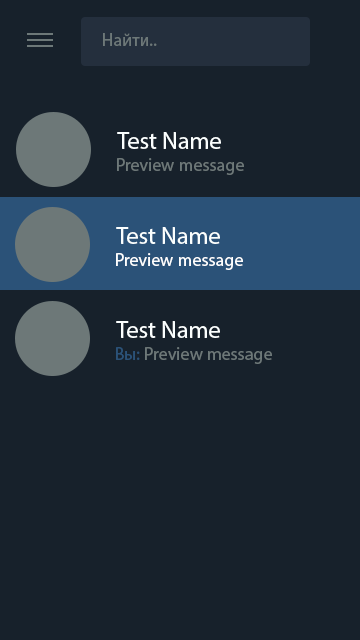
<style>
.page{position:relative;width:360px;height:640px;background:#17212b}
.page>*{position:absolute;margin:0}
.t1{font:18px "MyriadPro-Regular";color:#6d7878}
.t2{font:24px "MyriadPro-Regular";color:#fbffff}
.t3{font:18px "MyriadPro-Regular";color:#fefefe}
.t4{font:18px "MyriadPro-Regular";color:#2b5278}
</style>
<div class="page">
<p class="t1" style="left:103px;top:33px;width:54px;height:13px">Найти..</p>
<p class="t2" style="left:117px;top:132px;width:104px;height:17px">Test Name</p>
<p class="t1" style="left:117px;top:158px;width:127px;height:17px">Preview message</p>
<p class="t2" style="left:116px;top:227px;width:104px;height:17px">Test Name</p>
<p class="t3" style="left:116px;top:253px;width:127px;height:17px">Preview message</p>
<p class="t2" style="left:116px;top:321px;width:104px;height:17px">Test Name</p>
<p class="t1" style="left:116px;top:347px;width:156px;height:17px"><span class="t4">Вы: </span>Preview message</p>
</div>
